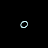
<style>
.page{position:relative;width:48px;height:48px;background:#000000}
.page>*{position:absolute;margin:0}
.t1{font:8.8px "AvantGardeLT-ExtraLightObl";color:#cdf8fd;text-transform:uppercase}
</style>
<div class="page">
<p class="t1" style="left:20px;top:21px;width:8px;height:7px">O</p>
</div>
